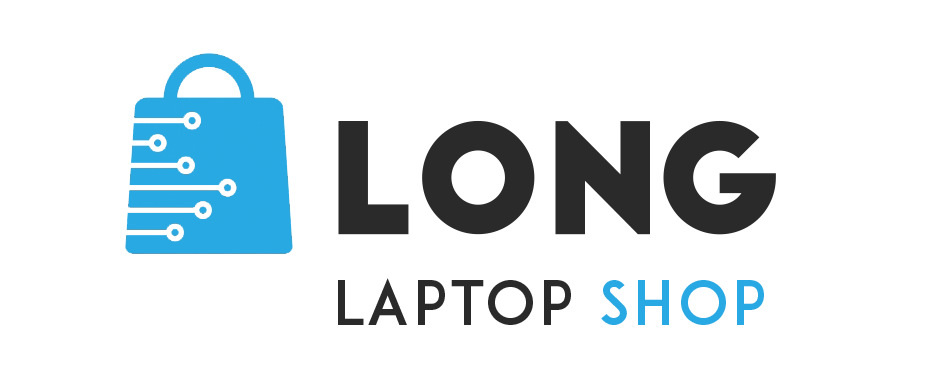
<style>
.page{position:relative;width:948px;height:390px;background:#ffffff}
.page>*{position:absolute;margin:0}
.t1{font:150px "BigJohn";color:#2a2a2a}
.t2{font:60px "ADAM.CGPRO";letter-spacing:0.06em;color:#2a2a2a}
.t3{font:60px "ADAM.CGPRO";letter-spacing:0.06em;color:#29a9e3}
</style>
<div class="page">
<p class="t1" style="left:338px;top:120px;width:438px;height:115px">LONG</p>
<p class="t2" style="left:338px;top:278px;width:426px;height:47px">Laptop <span class="t3">Shop</span></p>
</div>
